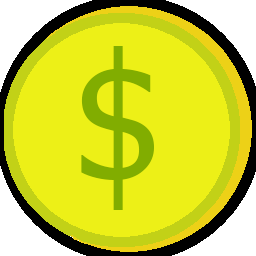
<style>
.page{position:relative;width:256px;height:256px;background:#edf017}
.page>*{position:absolute;margin:0}
.t1{font:174.2px "Tahoma";color:#81ad00;scale:0.93 1}
</style>
<div class="page">
<p class="t1" style="left:81px;top:46px;width:73px;height:164px">$</p>
</div>
